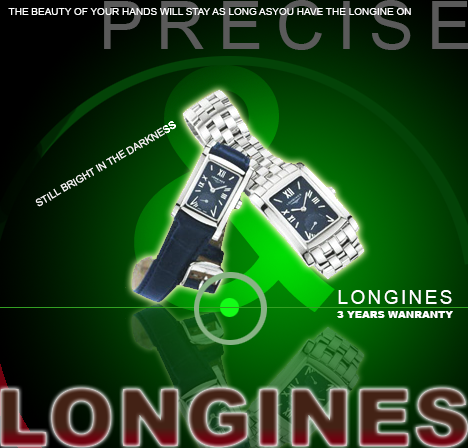
<style>
.page{position:relative;width:468px;height:448px}
.page>*{position:absolute;margin:0}
.t1{font:66.7px "ArialMT";letter-spacing:0.2em;color:#5a5a5a}
.t2{font:10px "ArialMT";color:#ffffff}
.t3{font:10px "ArialMT";color:#fffefe}
.t4{font:19.2px "ArialMT";letter-spacing:0.12em;color:#ffffff}
.t5{font:10px "Arial-Black";color:#ffffff}
.t6{font:80px "Arial-Black";letter-spacing:0.02em}
</style>
<div class="page">
<p class="t1" style="left:104px;top:0px;width:365px;height:50px">PRECISE</p>
<p class="t2" style="left:8px;top:8px;width:403px;height:7px">THE BEAUTY OF YOUR HANDS WILL STAY AS LONG ASYOU HAVE THE LONGINE ON</p>
<p class="t3" style="left:35px;top:121px;width:141px;height:86px;rotate:-30deg">STILL BRIGHT IN THE DARKNESS</p>
<p class="t4" style="left:338px;top:290px;width:114px;height:14px">LONGINES</p>
<p class="t5" style="left:337px;top:311px;width:116px;height:7px">3 YEARS WANRANTY</p>
<p class="t6" style="left:0px;top:388px;width:468px;height:59px">LONGINES</p>
</div>
